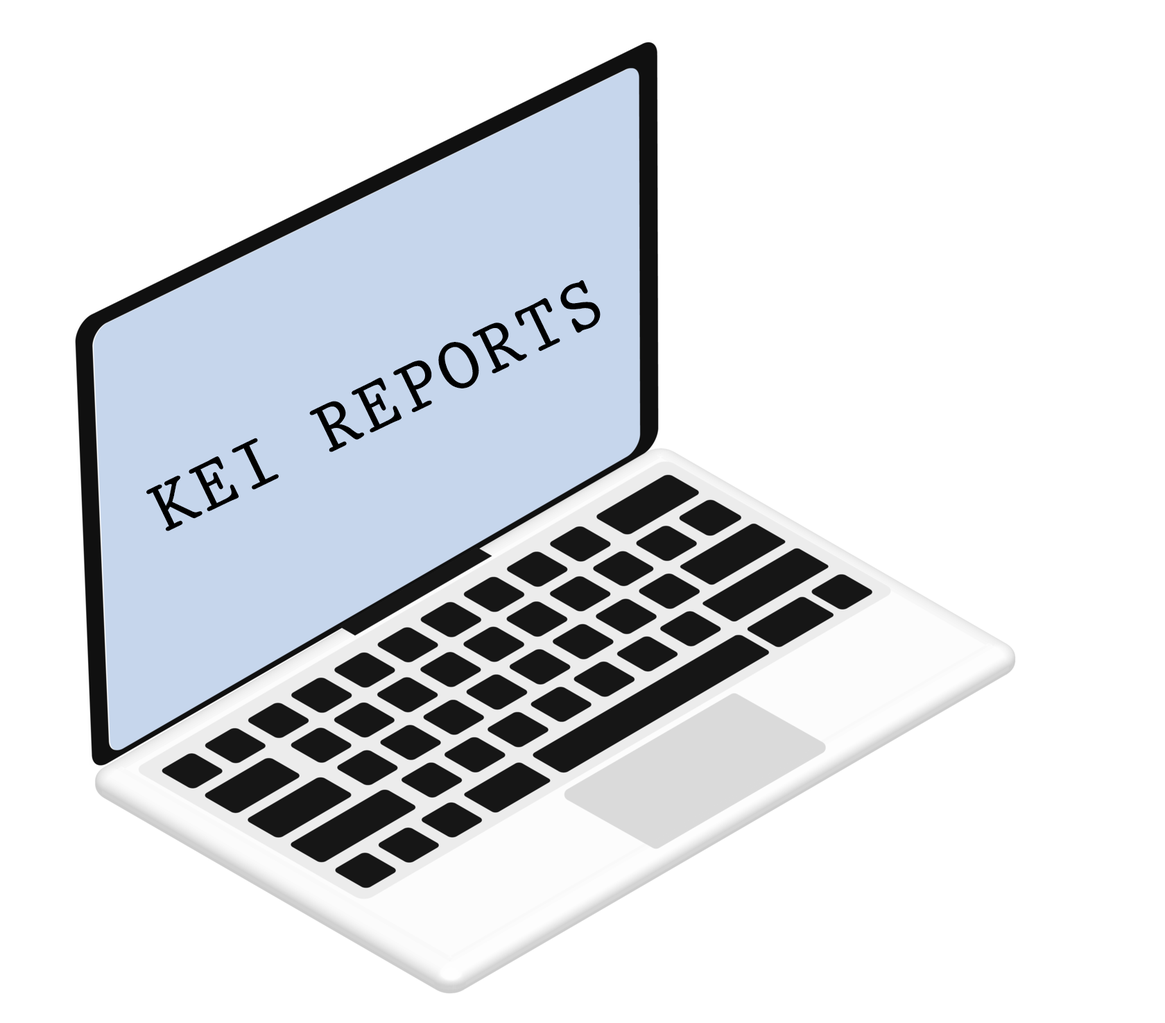
<style>
.page{position:relative;width:1165px;height:1023px;background:#ffffff}
.page>*{position:absolute;margin:0}
.t1{font:69.4px "King";letter-spacing:0.05em;color:#000000}
</style>
<div class="page">
<p class="t1" style="left:146px;top:280px;width:455px;height:251px;rotate:-26deg">KEI REPORTS</p>
</div>
